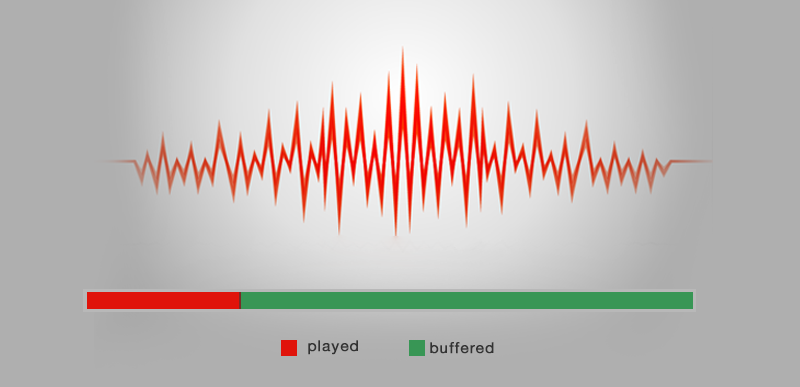
<style>
.page{position:relative;width:800px;height:387px;background:#afafaf}
.page>*{position:absolute;margin:0}
.t1{font:15px "HelveticaNeue";letter-spacing:0.06em;color:#323232;font-weight:bold}
</style>
<div class="page">
<p class="t1" style="left:308px;top:340px;width:50px;height:15px">played</p>
<p class="t1" style="left:430px;top:342px;width:64px;height:12px">buffered</p>
</div>
